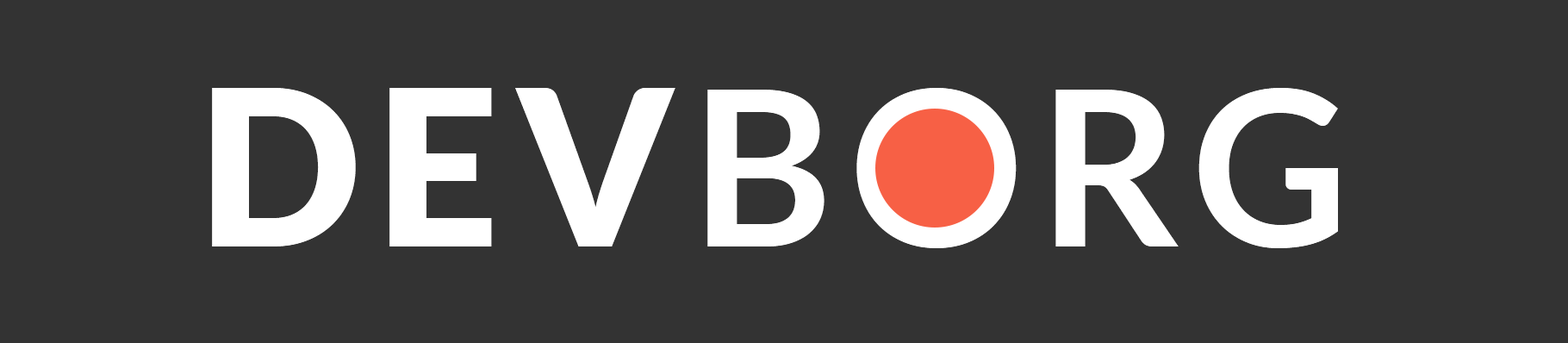
<style>
.page{position:relative;width:1568px;height:343px;background:#333333}
.page>*{position:absolute;margin:0}
.t1{font:217.1px "Lato-Bold";letter-spacing:0.075em;color:#ffffff;text-transform:uppercase}
.t2{font:217.1px "Lato-Black";letter-spacing:0.075em;color:#ffffff;text-transform:uppercase}
</style>
<div class="page">
<p class="t1" style="left:212px;top:88px;width:1126px;height:160px"><span class="t2">DEV</span>BORG</p>
</div>
